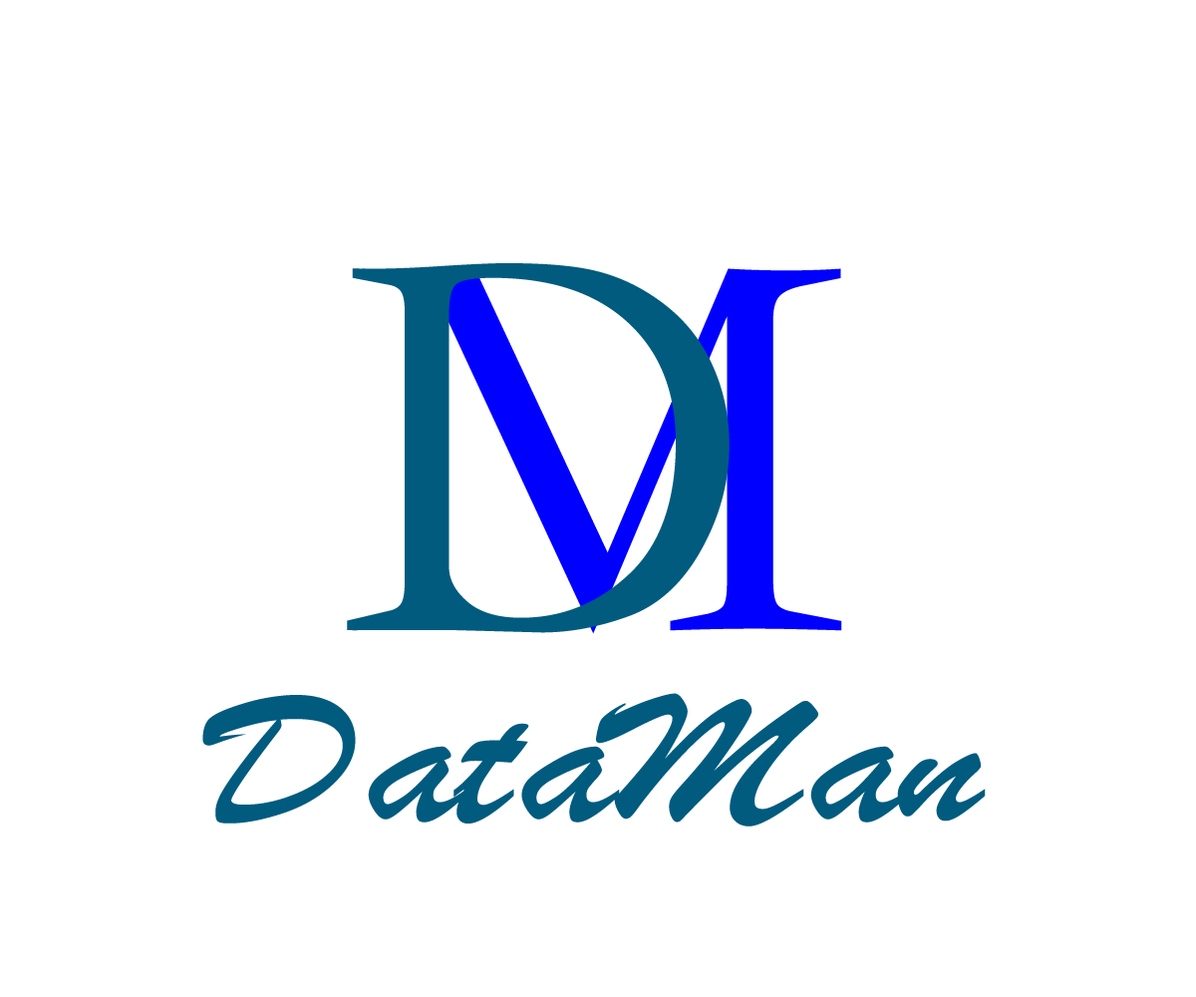
<style>
.page{position:relative;width:1196px;height:997px;background:#ffffff}
.page>*{position:absolute;margin:0}
.t1{font:580.2px "STKaiti";color:#005b7f;scale:0.93 1}
.t2{font:572.7px "STKaiti";color:#0000ff;scale:1.04 1}
.t3{font:194.3px "STXingkai";color:#005b7f;scale:1.2 1}
</style>
<div class="page">
<p class="t1" style="left:347px;top:263px;width:383px;height:370px">D</p>
<p class="t2" style="left:352px;top:268px;width:490px;height:366px">M</p>
<p class="t3" style="left:202px;top:693px;width:784px;height:133px">DataMan</p>
</div>
